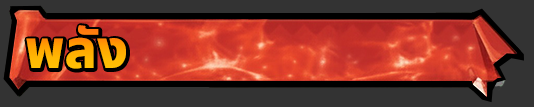
<style>
.page{position:relative;width:534px;height:107px;background:#333333}
.page>*{position:absolute;margin:0}
.t1{font:53.8px "NotoSansThai-ExtraBold";color:#ffae04}
.t2{font:53.8px "NotoSansThai-ExtraBold"}
</style>
<div class="page">
<p class="t1" style="left:26px;top:25px;width:100px;height:44px">พลัง</p>
<p class="t2" style="left:27px;top:26px;width:100px;height:44px">พลัง</p>
</div>
